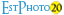
<style>
.page{position:relative;width:64px;height:15px;background:#ffffff}
.page>*{position:absolute;margin:0}
.t1{font:12.3px "TrajanPro-Regular";color:#3199ce}
.t2{font:8.2px "TrajanPro-Regular";color:#3199ce}
.t3{font:16.4px "TrajanPro-Regular";color:#3199ce}
</style>
<div class="page">
<p class="t1" style="left:1px;top:1px;width:8px;height:13px">E</p>
<p class="t2" style="left:8px;top:5px;width:11px;height:6px">st</p>
<p class="t3" style="left:18px;top:1px;width:8px;height:13px">P</p>
<p class="t2" style="left:26px;top:5px;width:24px;height:6px">hoto</p>
</div>
